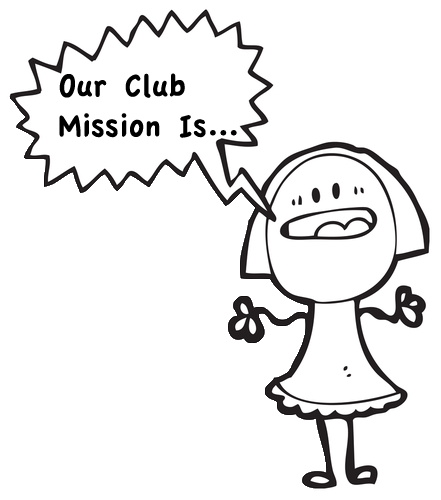
<style>
.page{position:relative;width:441px;height:500px;background:#ffffff}
.page>*{position:absolute;margin:0}
.t1{font:33.3px "AppleCasual";color:#000000}
</style>
<div class="page">
<p class="t1" style="left:59px;top:73px;width:178px;height:65px">Our Club <br>Mission Is...</p>
</div>
